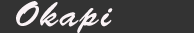
<style>
.page{position:relative;width:194px;height:33px;background:#333333}
.page>*{position:absolute;margin:0}
.t1{font:36px "BrushScriptStd";letter-spacing:0.075em;color:#faf3f6}
</style>
<div class="page">
<p class="t1" style="left:16px;top:1px;width:97px;height:33px">Okapi</p>
</div>
